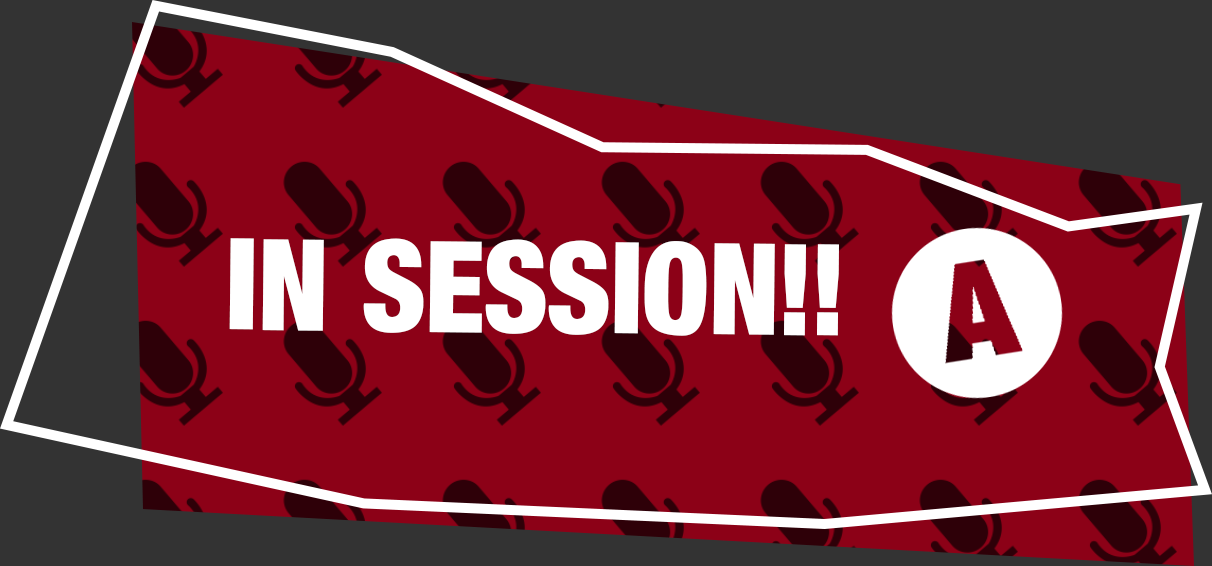
<style>
.page{position:relative;width:1212px;height:566px;background:#8c0117}
.page>*{position:absolute;margin:0}
.t1{font:126.1px "Harvest";color:#ffffff;scale:0.95 1}
</style>
<div class="page">
<p class="t1" style="left:229px;top:238px;width:610px;height:98px;rotate:1deg">IN SESSION!!</p>
</div>
